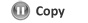
<style>
.page{position:relative;width:88px;height:23px;background:#ffffff}
.page>*{position:absolute;margin:0}
.t1{font:14px "Calibri-Bold";color:#363535}
</style>
<div class="page">
<p class="t1" style="left:36px;top:6px;width:29px;height:12px">Copy</p>
</div>
